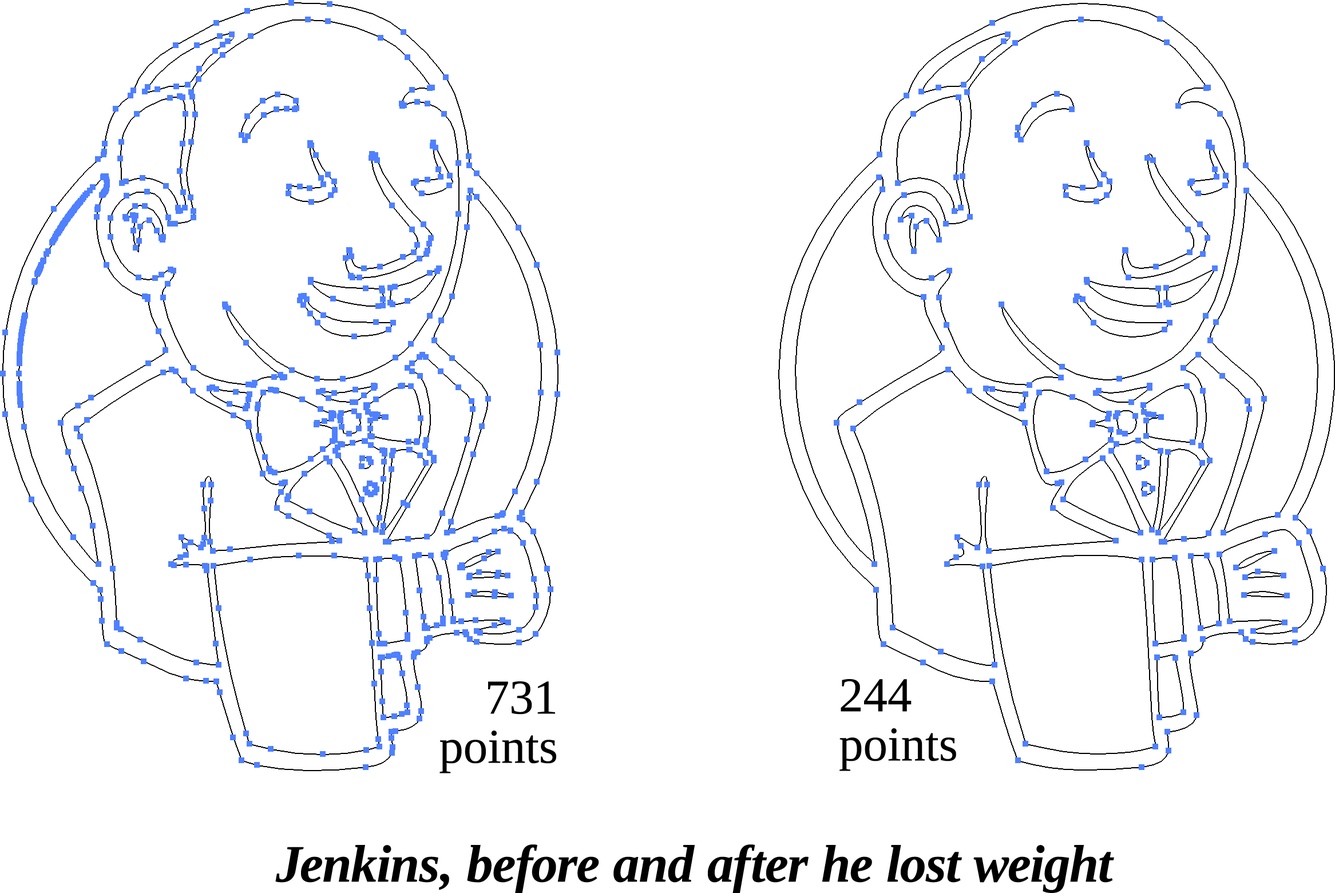
<style>
.page{position:relative;width:1335px;height:893px;background:#ffffff}
.page>*{position:absolute;margin:0}
.t1{font:48.6px/49.2px "LiberationSerif";color:#000000}
.t2{font:52.8px "LiberationSerif-BoldItalic";color:#000000}
</style>
<div class="page">
<p class="t1" style="left:439px;top:682px;width:117px;height:92px;text-align:right">731<br>points</p>
<p class="t1" style="left:839px;top:679px;width:117px;height:92px">244<br>points</p>
<p class="t2" style="left:275px;top:845px;width:839px;height:48px">Jenkins, before and after he lost weight</p>
</div>
